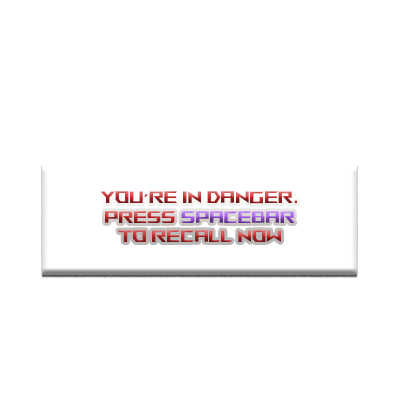
<style>
.page{position:relative;width:400px;height:400px;background:#ffffff}
.page>*{position:absolute;margin:0}
.t1{font:16.3px "ROGFonts-Regular"}
</style>
<div class="page">
<p class="t1" style="left:100px;top:191px;width:197px;height:51px;text-align:center">You’re in danger.<br>press Spacebar<br>to REcall NOW</p>
</div>
